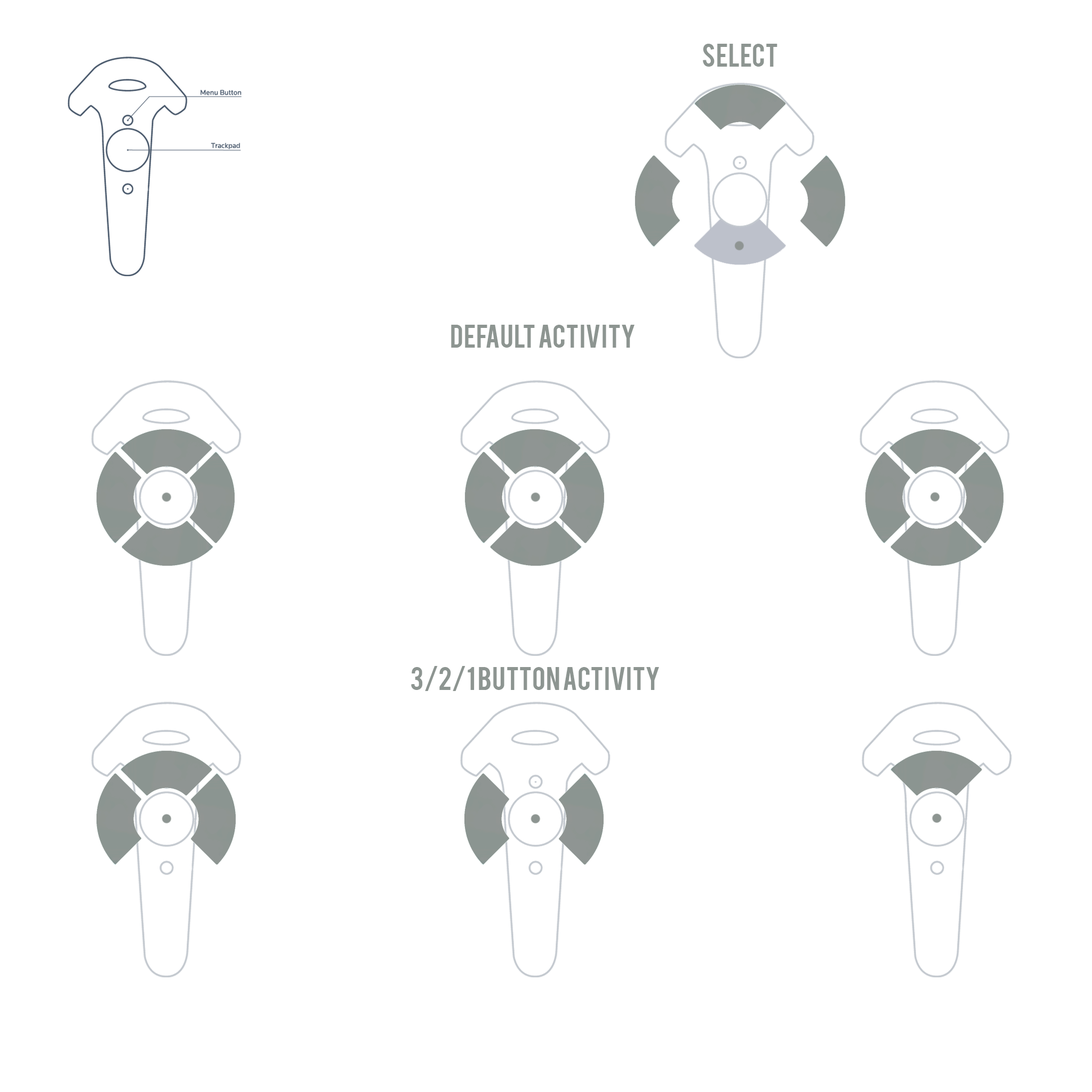
<style>
.page{position:relative;width:1092px;height:1092px;background:#ffffff}
.page>*{position:absolute;margin:0}
.t1{font:25.6px "Bebas";color:#8d9591}
</style>
<div class="page">
<p class="t1" style="left:703px;top:44px;width:74px;height:23px">SELECT</p>
<p class="t1" style="left:451px;top:325px;width:184px;height:23px">DEFAULT ACTIVITY</p>
<p class="t1" style="left:411px;top:666px;width:248px;height:25px">3/2/1 BUTTON ACTIVITY</p>
</div>
